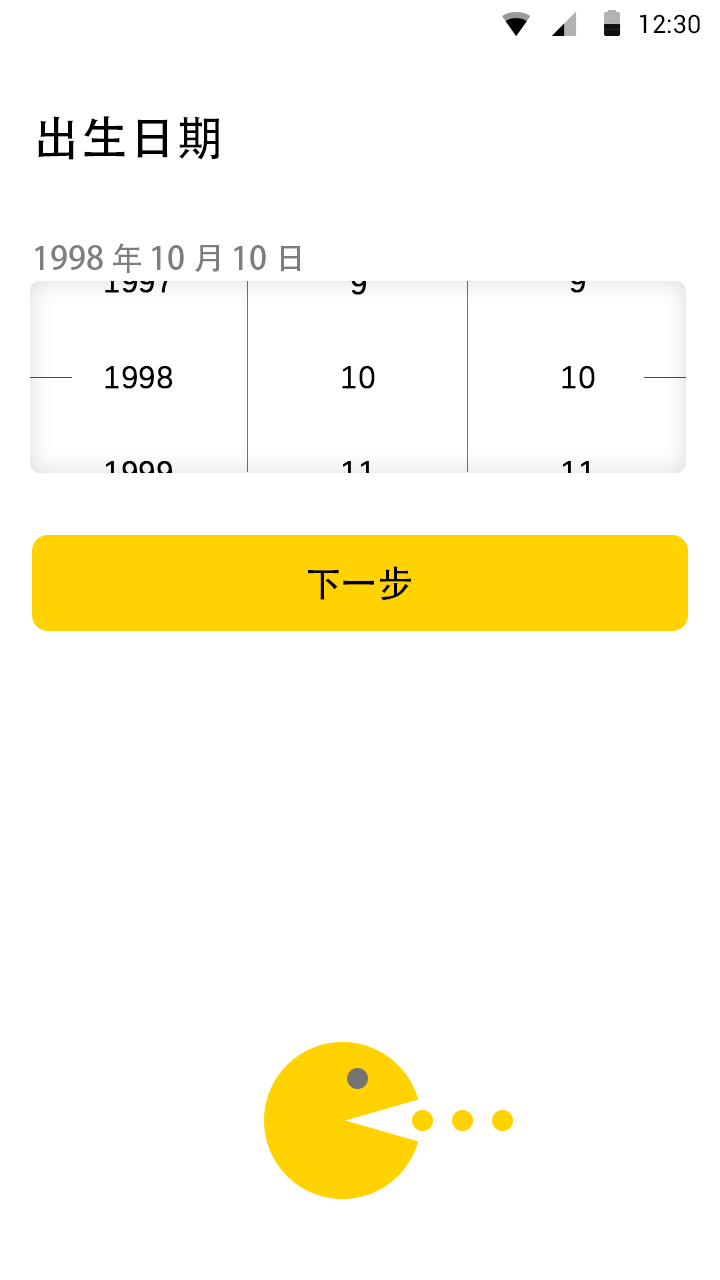
<style>
.page{position:relative;width:720px;height:1280px;background:#ffffff}
.page>*{position:absolute;margin:0}
.t1{font:25.4px "Roboto-Regular";color:#000000}
.t2{font:48px "AdobeHeitiStd-Regular";letter-spacing:-0.004em;color:#000000}
.t3{font:32px "AdobeHeitiStd-Regular";letter-spacing:-0.004em;color:#7e7e7e}
.t4{font:32px "DengXian-Regular";color:#000000;font-weight:bold}
.t5{font:36px "AdobeHeitiStd-Regular";letter-spacing:-0.004em;color:#000000}
</style>
<div class="page">
<p class="t1" style="left:640px;top:14px;width:60px;height:20px">12:30</p>
<p class="t2" style="left:38px;top:116px;width:182px;height:44px">出生日期</p>
<p class="t3" style="left:35px;top:243px;width:266px;height:30px">1998 年 10 月 10 日</p>
<p class="t4" style="left:105px;top:366px;width:68px;height:23px">1998</p>
<p class="t4" style="left:342px;top:366px;width:33px;height:23px">10</p>
<p class="t4" style="left:562px;top:366px;width:33px;height:23px">10</p>
<p class="t5" style="left:308px;top:566px;width:103px;height:35px">下一步</p>
</div>
